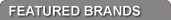
<style>
.page{position:relative;width:171px;height:20px;background:#858585}
.page>*{position:absolute;margin:0}
.t1{font:13.3px "Arial-BoldMT";color:#ffffff}
</style>
<div class="page">
<p class="t1" style="left:9px;top:5px;width:131px;height:11px">FEATURED BRANDS</p>
</div>
